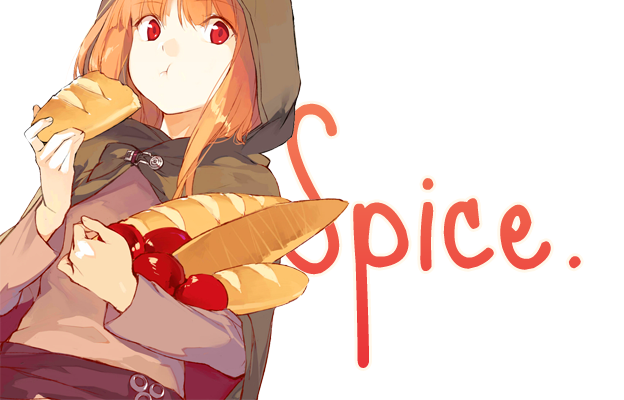
<style>
.page{position:relative;width:624px;height:400px;background:#ffffff}
.page>*{position:absolute;margin:0}
.t1{font:180px "SueEllenFrancisco";color:#ef5848}
</style>
<div class="page">
<p class="t1" style="left:280px;top:103px;width:301px;height:265px">Spice.</p>
</div>
